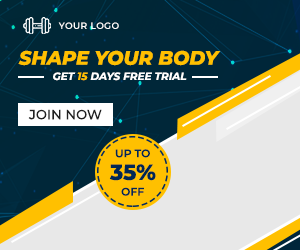
<style>
.page{position:relative;width:300px;height:250px;background:#e8e8e8}
.page>*{position:absolute;margin:0}
.t1{font:9px "Montserrat-SemiBold";letter-spacing:0.05em;color:#ffffff}
.t2{font:19.4px "Montserrat-ExtraBoldItalic";color:#ffc000}
.t3{font:10.6px "Montserrat-BoldItalic";color:#ffffff}
.t4{font:10.6px "Montserrat-BoldItalic";color:#ffc000}
.t5{font:13.3px "Montserrat-Medium";color:#212121}
.t6{font:11px "Montserrat-SemiBold";color:#002754}
.t7{font:21.9px "Montserrat-ExtraBold";color:#002754}
</style>
<div class="page">
<p class="t1" style="left:58px;top:22px;width:61px;height:7px">YOUR LOGO</p>
<p class="t2" style="left:18px;top:50px;width:203px;height:16px">SHAPE YOUR BODY</p>
<p class="t3" style="left:53px;top:72px;width:134px;height:9px">GET <span class="t4">15</span> DAYS FREE TRIAL</p>
<p class="t5" style="left:28px;top:109px;width:74px;height:11px">JOIN NOW</p>
<p class="t6" style="left:115px;top:149px;width:35px;height:9px">UP TO</p>
<p class="t7" style="left:109px;top:164px;width:47px;height:17px">35%</p>
<p class="t6" style="left:121px;top:187px;width:23px;height:9px">OFF</p>
</div>
